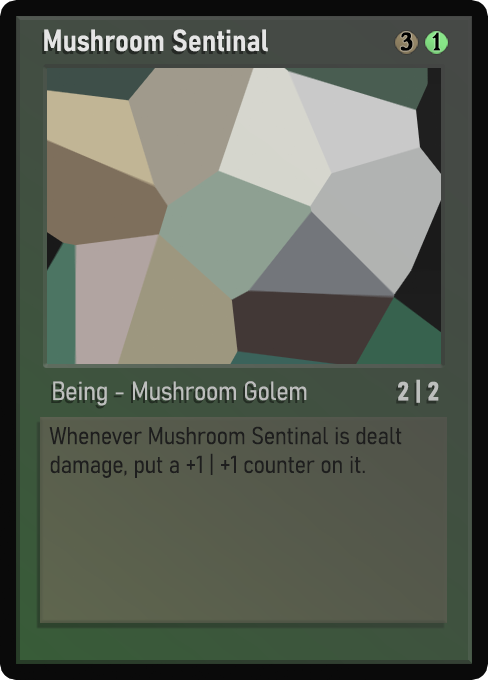
<style>
.page{position:relative;width:488px;height:680px}
.page>*{position:absolute;margin:0}
.t1{font:30px "Bahnschrift-SemiBoldSemiCondensed";color:#f2f2f2;font-weight:bold}
.t2{font:25px "WTRRoycroft";color:#000000;font-weight:bold;scale:1.09 1}
.t3{font:26px "Bahnschrift-LightSemiCondensed";color:#c8c8c8;font-weight:bold}
.t4{font:26px "Bahnschrift-BoldSemiCondensed";color:#bdbfbd;font-weight:bold}
.t5{font:24px "Bahnschrift-LightSemiCondensed";color:#1e1e1e;font-weight:bold}
</style>
<div class="page">
<p class="t1" style="left:44px;top:29px;width:224px;height:23px;opacity:0.9">Mushroom Sentinal</p>
<p class="t2" style="left:400px;top:32px;width:13px;height:19px">3</p>
<p class="t2" style="left:432px;top:32px;width:9px;height:19px">1</p>
<p class="t3" style="left:53px;top:381px;width:254px;height:25px;opacity:0.9">Being - Mushroom Golem</p>
<p class="t4" style="left:398px;top:379px;width:41px;height:24px">2 | 2</p>
<p class="t5" style="left:49px;top:426px;width:353px;height:52px">Whenever Mushroom Sentinal is dealt damage, put a +1 | +1 counter on it.</p>
</div>
